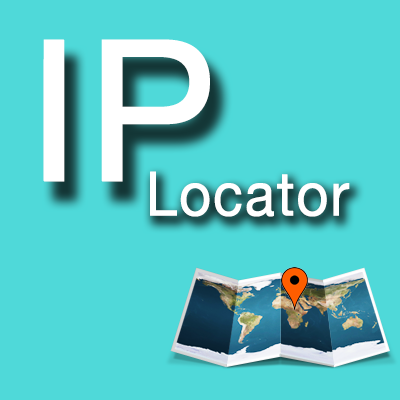
<style>
.page{position:relative;width:400px;height:400px;background:#4fd9d9}
.page>*{position:absolute;margin:0}
.t1{font:196.4px "HelveticaNeue";letter-spacing:0.01em;color:#ffffff;font-weight:bold}
.t2{font:61.1px "HelveticaNeue";letter-spacing:0.01em;color:#ffffff;font-weight:bold;scale:0.91 1}
</style>
<div class="page">
<p class="t1" style="left:43px;top:39px;width:167px;height:143px">IP</p>
<p class="t2" style="left:150px;top:171px;width:200px;height:46px">Locator</p>
</div>
